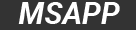
<style>
.page{position:relative;width:136px;height:30px;background:#333333}
.page>*{position:absolute;margin:0}
.t1{font:30px "Roboto-BoldItalic";color:#ffffff}
</style>
<div class="page">
<p class="t1" style="left:18px;top:2px;width:102px;height:22px">MSAPP</p>
</div>
